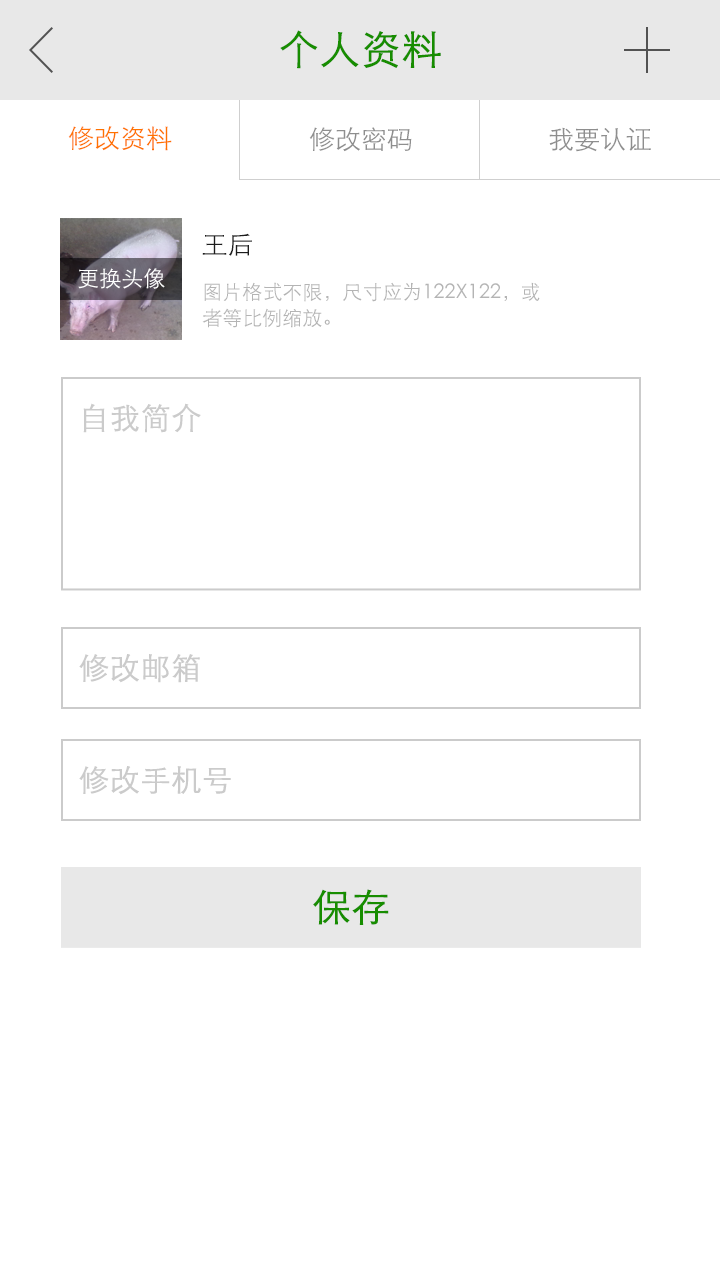
<style>
.page{position:relative;width:720px;height:1280px;background:#ffffff}
.page>*{position:absolute;margin:0}
.t1{font:40px "STXihei";color:#178d00;font-weight:bold}
.t2{font:26px "STXihei";color:#ff7200}
.t3{font:26px "STXihei";color:#8e8e8e}
.t4{font:26px "STXihei";color:#1d1d1d}
.t5{font:22px "STXihei";color:#ffffff}
.t6{font:20px/26px "STXihei";color:#b4b4b4}
.t7{font:30px "STXihei";color:#cbcbcb;font-weight:bold}
.t8{font:38px "STXihei";color:#178d00;font-weight:bold}
</style>
<div class="page">
<p class="t1" style="left:280px;top:30px;width:161px;height:39px">个人资料</p>
<p class="t2" style="left:68px;top:126px;width:104px;height:25px">修改资料</p>
<p class="t3" style="left:309px;top:127px;width:103px;height:25px">修改密码</p>
<p class="t3" style="left:549px;top:127px;width:102px;height:25px">我要认证</p>
<p class="t4" style="left:202px;top:233px;width:50px;height:23px">王后</p>
<p class="t5" style="left:78px;top:268px;width:87px;height:21px">更换头像</p>
<p class="t6" style="left:202px;top:282px;width:338px;height:46px;text-align:justify">图片格式不限，尺寸应为122X122，或<br>者等比例缩放。</p>
<p class="t7" style="left:83px;top:403px;width:118px;height:30px">自我简介</p>
<p class="t7" style="left:79px;top:654px;width:121px;height:29px">修改邮箱</p>
<p class="t7" style="left:79px;top:766px;width:152px;height:29px">修改手机号</p>
<p class="t8" style="left:313px;top:889px;width:76px;height:36px">保存</p>
</div>
